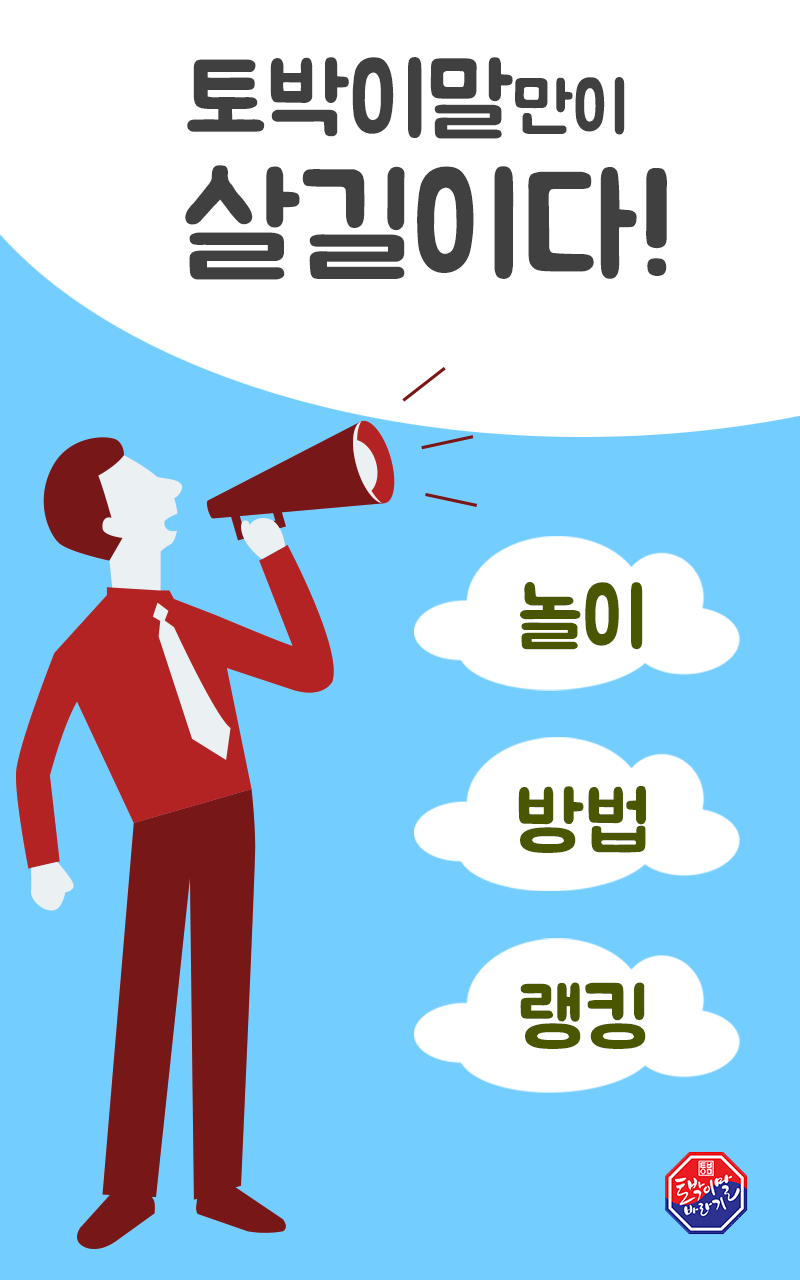
<style>
.page{position:relative;width:800px;height:1280px;background:#74cdff}
.page>*{position:absolute;margin:0}
.t1{font:99.7px "BMJUA";color:#404040}
.t2{font:70.7px "BMJUA";color:#404040}
.t3{font:138.8px "BMJUA";color:#404040}
.t4{font:82.4px "BMJUA";color:#4b5601}
</style>
<div class="page">
<p class="t1" style="left:187px;top:57px;width:438px;height:82px">토박이말<span class="t2">만이</span></p>
<p class="t3" style="left:185px;top:165px;width:482px;height:115px">살길이다!</p>
<p class="t4" style="left:520px;top:582px;width:123px;height:68px">놀이</p>
<p class="t4" style="left:518px;top:786px;width:128px;height:67px">방법</p>
<p class="t4" style="left:520px;top:982px;width:126px;height:67px">랭킹</p>
</div>
